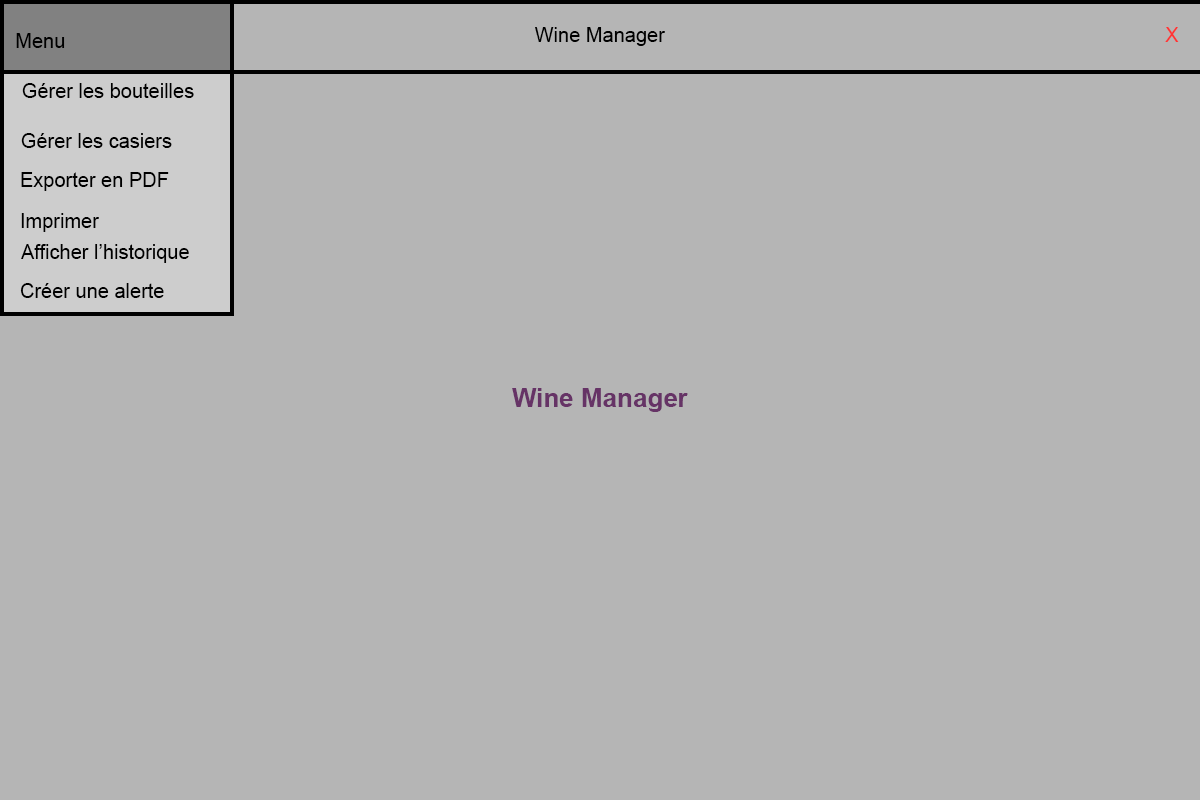
<style>
.page{position:relative;width:1200px;height:800px;background:#b5b5b5}
.page>*{position:absolute;margin:0}
.t1{font:20px "ArialMT";color:#000000}
.t2{font:20px "ArialMT";color:#ff3333}
.t3{font:26px "Arial-BoldMT";color:#663366}
</style>
<div class="page">
<p class="t1" style="left:535px;top:27px;width:130px;height:19px">Wine Manager</p>
<p class="t2" style="left:1165px;top:27px;width:14px;height:15px">X</p>
<p class="t1" style="left:16px;top:33px;width:49px;height:15px">Menu</p>
<p class="t1" style="left:22px;top:83px;width:172px;height:15px">Gérer les bouteilles</p>
<p class="t1" style="left:21px;top:133px;width:151px;height:15px">Gérer les casiers</p>
<p class="t1" style="left:21px;top:172px;width:148px;height:19px">Exporter en PDF</p>
<p class="t1" style="left:21px;top:213px;width:78px;height:19px">Imprimer</p>
<p class="t1" style="left:21px;top:244px;width:168px;height:19px">Afficher l’historique</p>
<p class="t1" style="left:20px;top:283px;width:144px;height:15px">Créer une alerte</p>
<p class="t3" style="left:512px;top:388px;width:176px;height:24px">Wine Manager</p>
</div>
